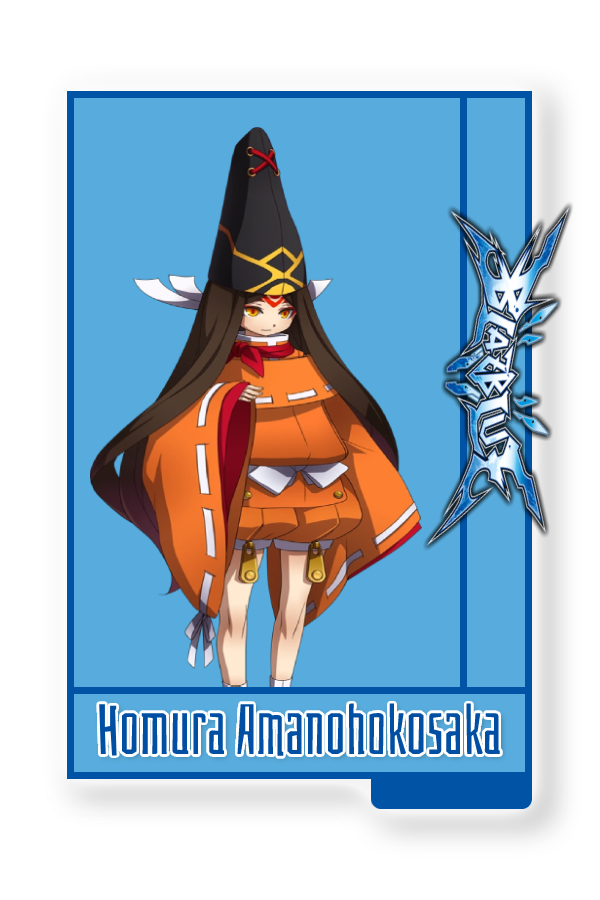
<style>
.page{position:relative;width:600px;height:900px;background:#58acdd}
.page>*{position:absolute;margin:0}
.t1{font:70px "Bahianita-Regular";color:#004fa2}
</style>
<div class="page">
<p class="t1" style="left:99px;top:703px;width:401px;height:53px">Homura Amanohokosaka</p>
</div>
